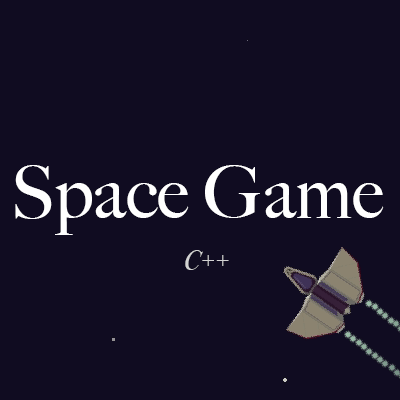
<style>
.page{position:relative;width:400px;height:400px;background:#100c21}
.page>*{position:absolute;margin:0}
.t1{font:72px "BigCaslon-Medium";color:#ffffff}
.t2{font:28px "BodoniSvtyTwoITCTT-BookIta";color:#d3d3d3}
</style>
<div class="page">
<p class="t1" style="left:15px;top:165px;width:369px;height:70px">Space Game</p>
<p class="t2" style="left:185px;top:250px;width:44px;height:20px">C++</p>
</div>
